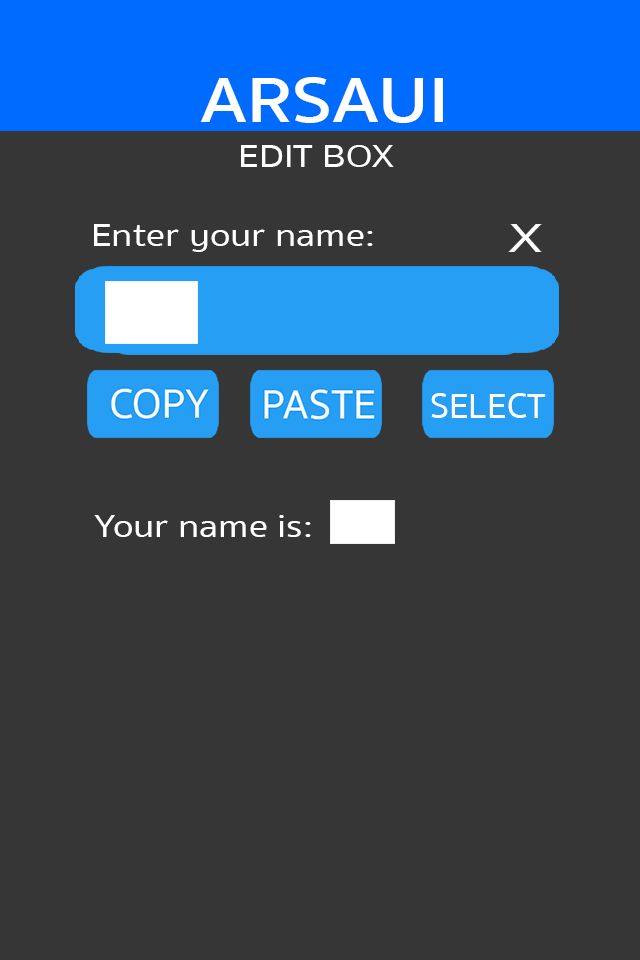
<style>
.page{position:relative;width:640px;height:960px;background:#363636}
.page>*{position:absolute;margin:0}
.t1{font:66px "SukhumvitSet-SemiBold";color:#ffffff;scale:1.14 1}
.t2{font:33.4px "SukhumvitSet-Medium";color:#ffffff;scale:1.14 1}
.t3{font:33.1px "SukhumvitSet-Medium";color:#ffffff;scale:1.14 1}
.t4{font:40.7px "SukhumvitSet-Medium";color:#ffffff;scale:1.43 1}
</style>
<div class="page">
<p class="t1" style="left:200px;top:77px;width:243px;height:46px">ARSAUI</p>
<p class="t2" style="left:241px;top:145px;width:153px;height:22px">EDIT BOX</p>
<p class="t3" style="left:94px;top:224px;width:279px;height:28px">Enter your name:</p>
<p class="t4" style="left:508px;top:224px;width:34px;height:28px">X</p>
<p class="t3" style="left:94px;top:515px;width:217px;height:22px">Your name is:</p>
</div>
